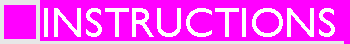
<style>
.page{position:relative;width:350px;height:44px;background:#ff00ff}
.page>*{position:absolute;margin:0}
.t1{font:42px "GillSansMT";color:#ffffff}
</style>
<div class="page">
<p class="t1" style="left:44px;top:8px;width:291px;height:29px">INSTRUCTIONS</p>
</div>
